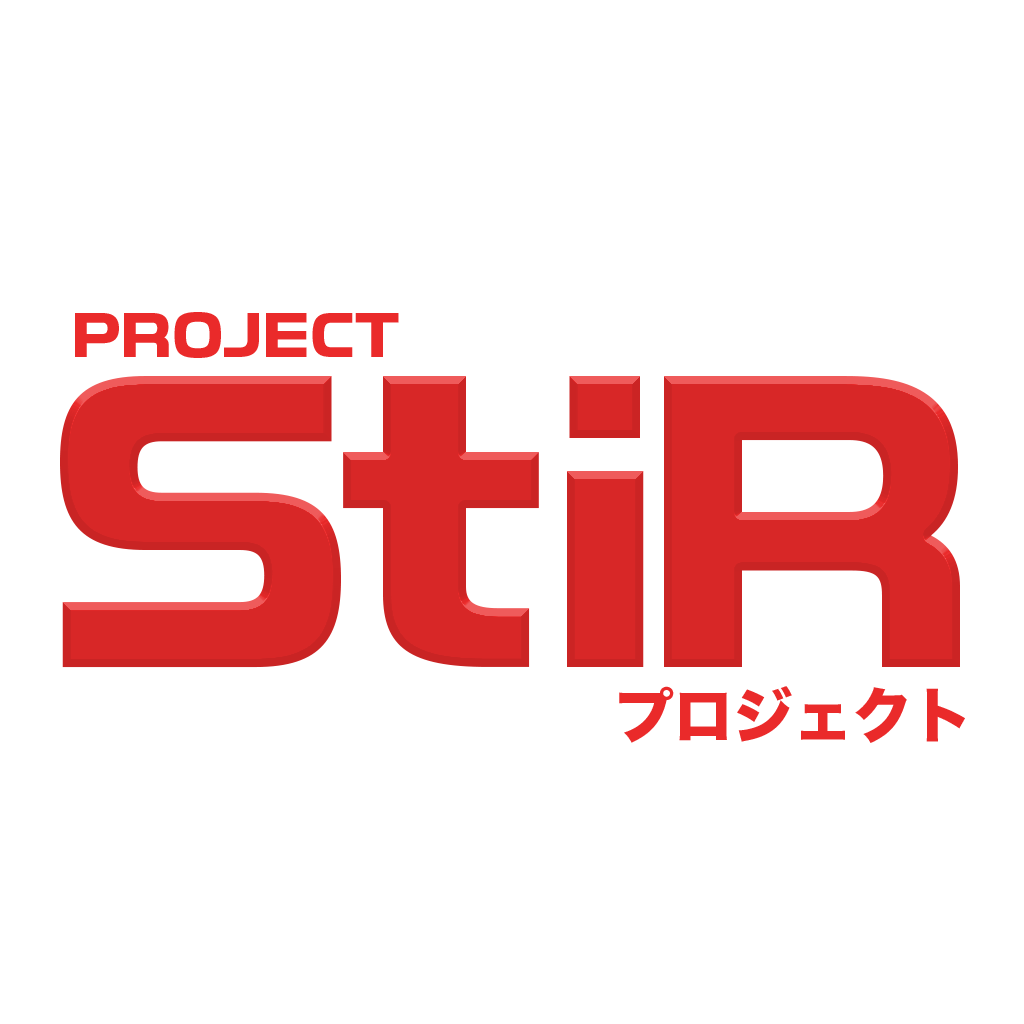
<style>
.page{position:relative;width:1024px;height:1024px;background:#ffffff}
.page>*{position:absolute;margin:0}
.t1{font:60px "ToxigenesisRg-Bold";letter-spacing:-0.005em;color:#ea2a2a}
.t2{font:398.1px "ToxigenesisRg-Bold";letter-spacing:-0.06em;color:#ea2a2a}
.t3{font:463.5px "ToxigenesisRg-Bold";letter-spacing:-0.02em;color:#ea2a2a}
.t4{font:424px "ToxigenesisRg-Bold";letter-spacing:-0.08em;color:#ea2a2a}
.t5{font:398.1px "ToxigenesisRg-Bold";color:#ea2a2a}
.t6{font:60px "HiraKakuStd-W8";letter-spacing:-0.005em;color:#ea2a2a}
</style>
<div class="page">
<p class="t1" style="left:75px;top:312px;width:324px;height:46px">PROJECT</p>
<p class="t2" style="left:60px;top:376px;width:900px;height:292px">S<span class="t3">t</span><span class="t4">i</span><span class="t5">R</span></p>
<p class="t6" style="left:619px;top:686px;width:346px;height:57px">プロジェクト</p>
</div>
